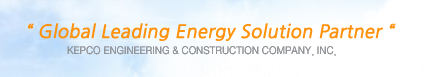
<style>
.page{position:relative;width:426px;height:77px;background:#ffffff}
.page>*{position:absolute;margin:0}
.t1{font:17.9px "NanumGothic";color:#ff920c;font-weight:bold;font-style:italic}
</style>
<div class="page">
<p class="t1" style="left:28px;top:23px;width:368px;height:18px">“ Global Leading Energy Solution Partner “</p>
</div>
